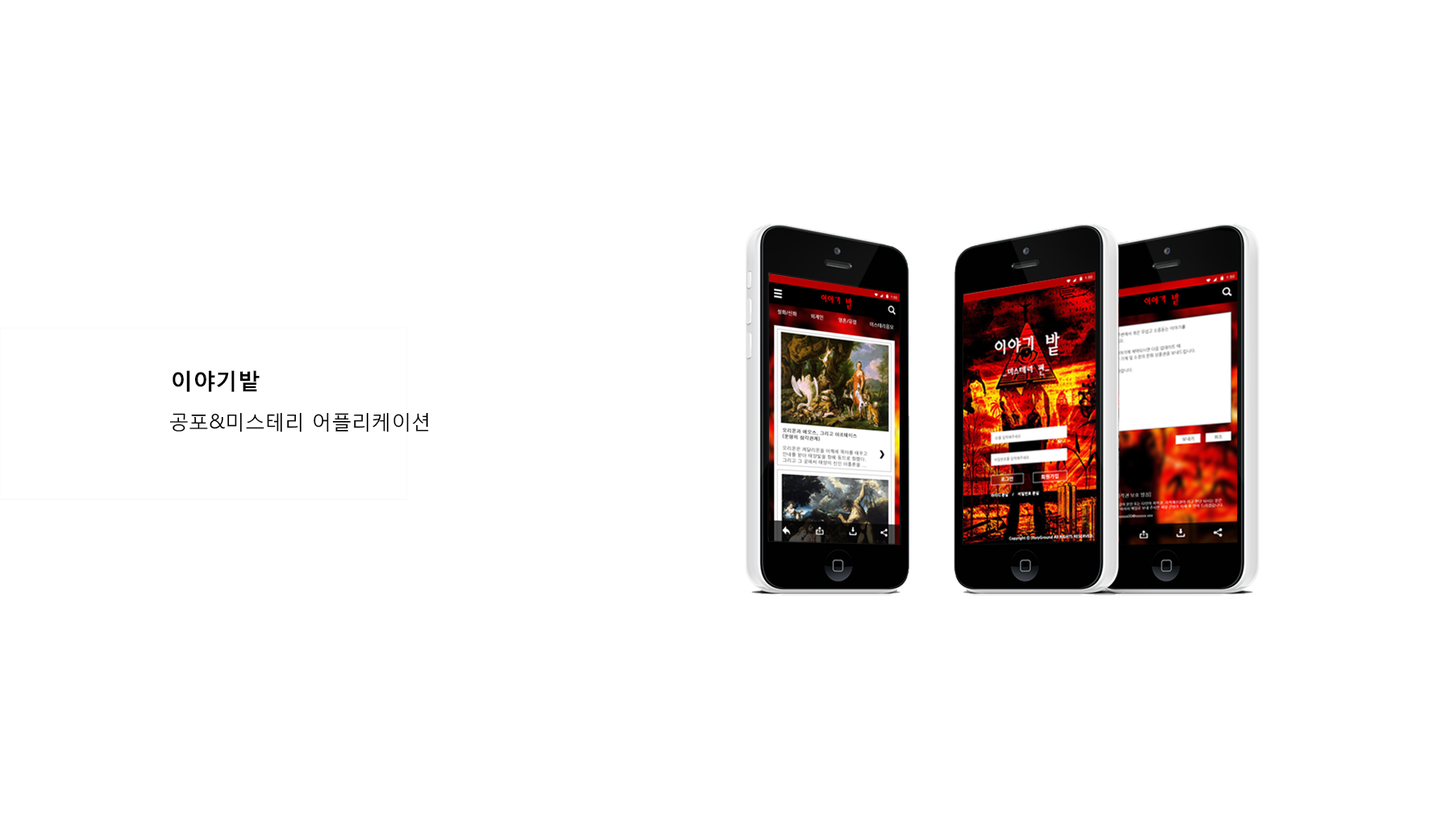
<style>
.page{position:relative;width:1451px;height:822px;background:#ffffff}
.page>*{position:absolute;margin:0}
.t1{font:22.4px "MalgunGothicBold";color:#000000}
.t2{font:19.9px "MalgunGothicRegular";color:#000000}
</style>
<div class="page">
<p class="t1" style="left:173px;top:370px;width:87px;height:22px">이야기밭</p>
<p class="t2" style="left:170px;top:412px;width:259px;height:20px">공포&amp;미스테리 어플리케이션</p>
</div>
